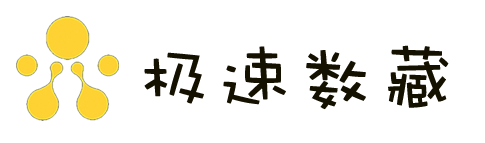
<style>
.page{position:relative;width:485px;height:143px;background:#ffffff}
.page>*{position:absolute;margin:0}
.t1{font:75px "DFWaWaSC-W5";letter-spacing:0.08em;color:#151101}
</style>
<div class="page">
<p class="t1" style="left:144px;top:45px;width:305px;height:65px">极速数藏</p>
</div>
